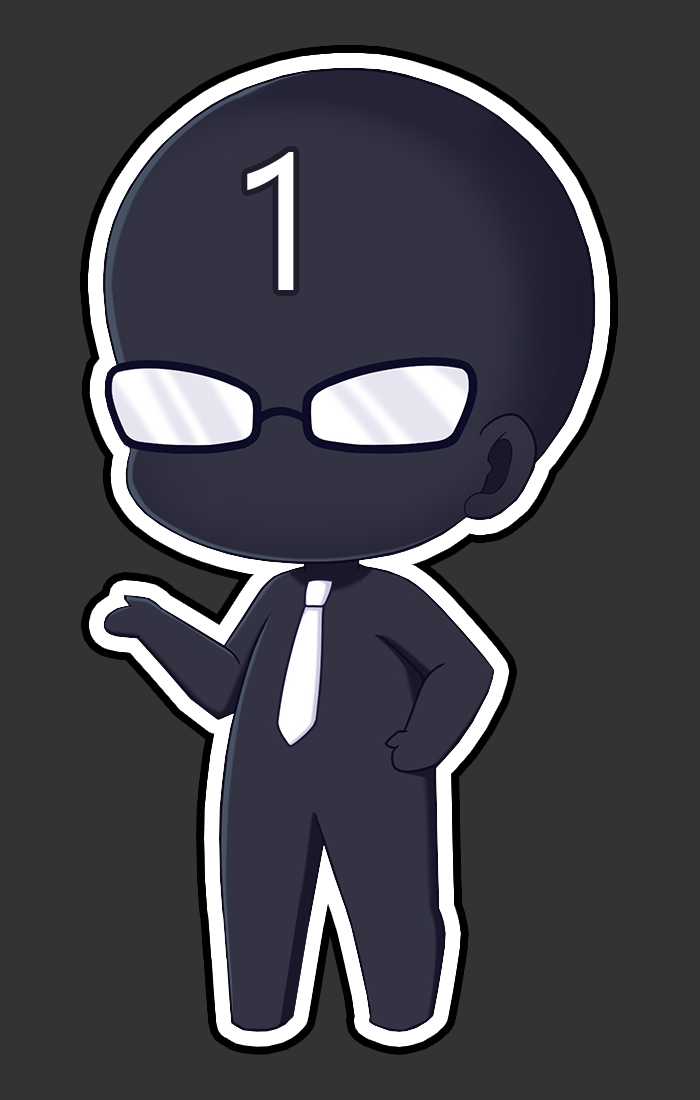
<style>
.page{position:relative;width:700px;height:1100px;background:#333333}
.page>*{position:absolute;margin:0}
.t1{font:180px "MicrosoftJhengHeiUIRegular";letter-spacing:0.06em;color:#ffffff}
</style>
<div class="page">
<p class="t1" style="left:247px;top:152px;width:47px;height:138px">1</p>
</div>
